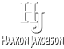
<style>
.page{position:relative;width:64px;height:49px;background:#ffffff}
.page>*{position:absolute;margin:0}
.t1{font:14.7px "AvianoSansRegular";letter-spacing:0.075em;scale:0.38 1}
</style>
<div class="page">
<p class="t1" style="left:2px;top:36px;width:62px;height:12px">Haakon Jakobson</p>
</div>
